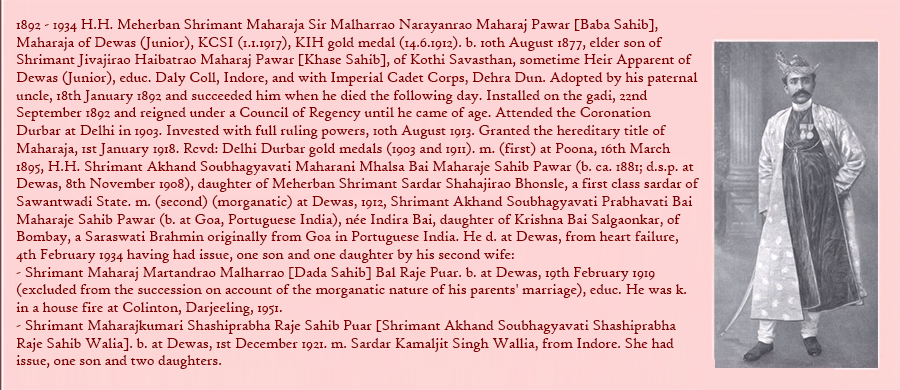
<style>
.page{position:relative;width:900px;height:390px;background:#fed5d6}
.page>*{position:absolute;margin:0}
.t1{font:14.8px "HighTowerText-Reg";color:#800000}
</style>
<div class="page">
<p class="t1" style="left:16px;top:19px;width:683px;height:350px">1892 - 1934 H.H. Meherban Shrimant Maharaja Sir Malharrao Narayanrao Maharaj Pawar [Baba Sahib], Maharaja of Dewas (Junior), KCSI (1.1.1917), KIH gold medal (14.6.1912). b. 10th August 1877, elder son of Shrimant Jivajirao Haibatrao Maharaj Pawar [Khase Sahib], of Kothi Savasthan, sometime Heir Apparent of Dewas (Junior), educ. Daly Coll, Indore, and with Imperial Cadet Corps, Dehra Dun. Adopted by his paternal uncle, 18th January 1892 and succeeded him when he died the following day. Installed on the gadi, 22nd September 1892 and reigned under a Council of Regency until he came of age. Attended the Coronation Durbar at Delhi in 1903. Invested with full ruling powers, 10th August 1913. Granted the hereditary title of Maharaja, 1st January 1918. Rcvd: Delhi Durbar gold medals (1903 and 1911). m. (first) at Poona, 16th March 1895, H.H. Shrimant Akhand Soubhagyavati Maharani Mhalsa Bai Maharaje Sahib Pawar (b. ca. 1881; d.s.p. at Dewas, 8th November 1908), daughter of Meherban Shrimant Sardar Shahajirao Bhonsle, a first class sardar of Sawantwadi State. m. (second) (morganatic) at Dewas, 1912, Shrimant Akhand Soubhagyavati Prabhavati Bai Maharaje Sahib Pawar (b. at Goa, Portuguese India), née Indira Bai, daughter of Krishna Bai Salgaonkar, of Bombay, a Saraswati Brahmin originally from Goa in Portuguese India. He d. at Dewas, from heart failure, 4th February 1934 having had issue, one son and one daughter by his second wife:<br>- Shrimant Maharaj Martandrao Malharrao [Dada Sahib] Bal Raje Puar. b. at Dewas, 19th February 1919 (excluded from the succession on account of the morganatic nature of his parents' marriage), educ. He was k. in a house fire at Colinton, Darjeeling, 1951.<br>- Shrimant Maharajkumari Shashiprabha Raje Sahib Puar [Shrimant Akhand Soubhagyavati Shashiprabha Raje Sahib Walia]. b. at Dewas, 1st December 1921. m. Sardar Kamaljit Singh Wallia, from Indore. She had issue, one son and two daughters.</p>
</div>
